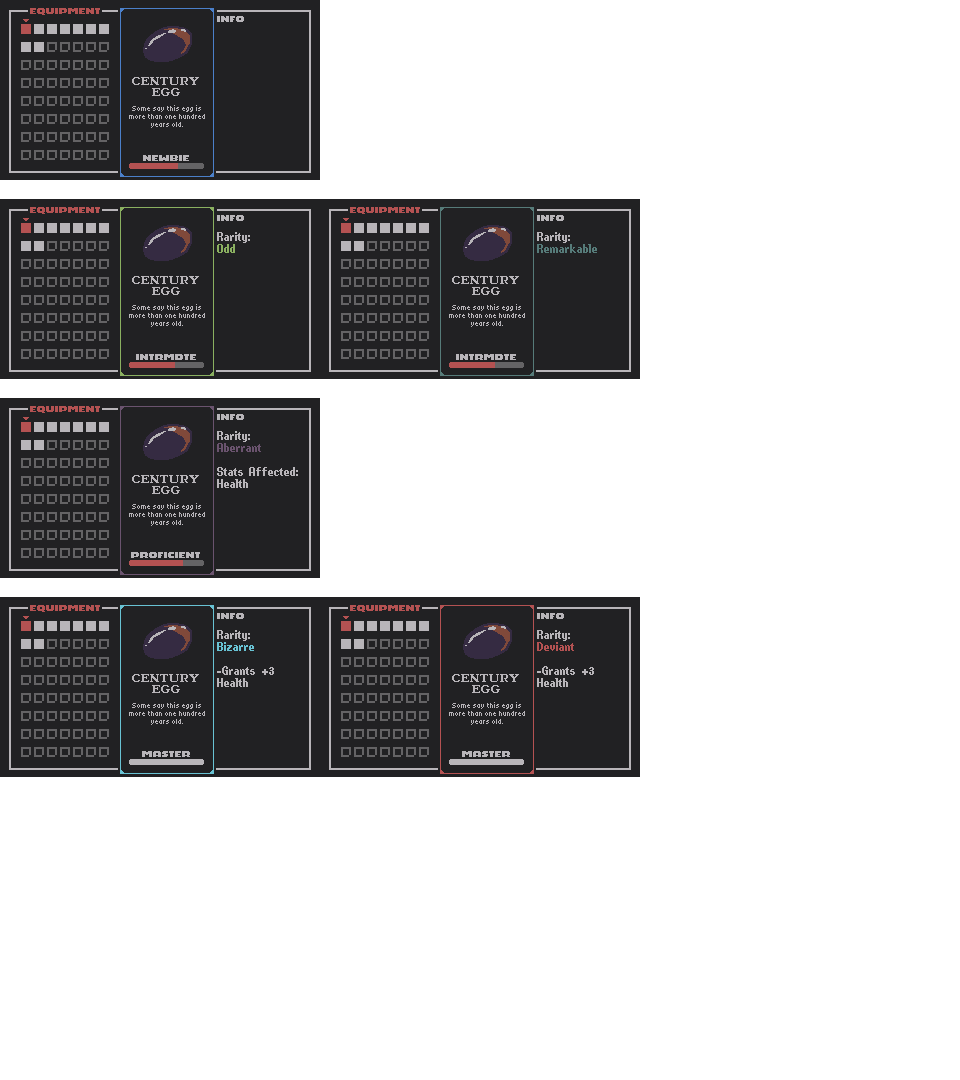
<style>
.page{position:relative;width:960px;height:1080px;background:#ffffff}
.page>*{position:absolute;margin:0}
.t1{font:8px "NotJamChunky8";color:#b45252}
.t2{font:8px "NotJamChunky8";color:#b8b5b9}
.t3{font:11px/11px "NotJamOldStyle11";color:#b8b5b9}
.t4{font:8px/8px "Tiny5-Regular";color:#b8b5b9}
.t5{font:16px/12px "PixelPurl";color:#b8b5b9}
.t6{font:16px/12px "PixelPurl";color:#8ab060}
.t7{font:16px/12px "PixelPurl";color:#567b79}
.t8{font:16px/12px "PixelPurl";color:#6a536e}
.t9{font:16px/12px "PixelPurl";color:#68c2d3}
.t10{font:16px/12px "PixelPurl";color:#b45252}
</style>
<div class="page">
<p class="t1" style="left:30px;top:8px;width:70px;height:7px">EQUIPMENT</p>
<p class="t2" style="left:217px;top:16px;width:27px;height:6px">INFO</p>
<p class="t3" style="left:132px;top:77px;width:67px;height:19px;text-align:center">CENTURY EGG</p>
<p class="t4" style="left:129px;top:105px;width:76px;height:23px;text-align:center">Some say this egg is more than one hundred years old.</p>
<p class="t2" style="left:143px;top:155px;width:46px;height:6px">NEWBIE</p>
<p class="t1" style="left:30px;top:207px;width:70px;height:7px">EQUIPMENT</p>
<p class="t1" style="left:350px;top:207px;width:70px;height:7px">EQUIPMENT</p>
<p class="t2" style="left:217px;top:215px;width:27px;height:6px">INFO</p>
<p class="t2" style="left:537px;top:215px;width:27px;height:6px">INFO</p>
<p class="t5" style="left:217px;top:232px;width:33px;height:21px">Rarity:<br><span class="t6">Odd</span></p>
<p class="t7" style="left:537px;top:232px;width:60px;height:21px"><span class="t5">Rarity:<br></span>Remarkable</p>
<p class="t3" style="left:132px;top:276px;width:67px;height:19px;text-align:center">CENTURY EGG</p>
<p class="t3" style="left:452px;top:276px;width:67px;height:19px;text-align:center">CENTURY EGG</p>
<p class="t4" style="left:129px;top:304px;width:76px;height:23px;text-align:center">Some say this egg is more than one hundred years old.</p>
<p class="t4" style="left:449px;top:304px;width:76px;height:23px;text-align:center">Some say this egg is more than one hundred years old.</p>
<p class="t2" style="left:136px;top:354px;width:60px;height:6px">INTRMDTE</p>
<p class="t2" style="left:456px;top:354px;width:60px;height:6px">INTRMDTE</p>
<p class="t1" style="left:30px;top:406px;width:70px;height:7px">EQUIPMENT</p>
<p class="t2" style="left:217px;top:414px;width:27px;height:6px">INFO</p>
<p class="t5" style="left:217px;top:431px;width:81px;height:57px">Rarity:<br><span class="t8">Aberrant<br></span><br>Stats Affected:<br>Health</p>
<p class="t3" style="left:132px;top:475px;width:67px;height:19px;text-align:center">CENTURY EGG</p>
<p class="t4" style="left:129px;top:503px;width:76px;height:23px;text-align:center">Some say this egg is more than one hundred years old.</p>
<p class="t2" style="left:131px;top:552px;width:69px;height:6px">PROFICIENT</p>
<p class="t1" style="left:30px;top:605px;width:70px;height:7px">EQUIPMENT</p>
<p class="t1" style="left:350px;top:605px;width:70px;height:7px">EQUIPMENT</p>
<p class="t2" style="left:217px;top:613px;width:27px;height:6px">INFO</p>
<p class="t2" style="left:537px;top:613px;width:27px;height:6px">INFO</p>
<p class="t5" style="left:217px;top:630px;width:57px;height:57px">Rarity:<br><span class="t9">Bizarre<br></span><br>-Grants +3 Health</p>
<p class="t5" style="left:537px;top:630px;width:57px;height:57px">Rarity:<br><span class="t10">Deviant<br></span><br>-Grants +3 Health</p>
<p class="t3" style="left:132px;top:674px;width:67px;height:19px;text-align:center">CENTURY EGG</p>
<p class="t3" style="left:452px;top:674px;width:67px;height:19px;text-align:center">CENTURY EGG</p>
<p class="t4" style="left:129px;top:702px;width:76px;height:23px;text-align:center">Some say this egg is more than one hundred years old.</p>
<p class="t4" style="left:449px;top:702px;width:76px;height:23px;text-align:center">Some say this egg is more than one hundred years old.</p>
<p class="t2" style="left:142px;top:751px;width:48px;height:6px">MASTER</p>
<p class="t2" style="left:462px;top:751px;width:48px;height:6px">MASTER</p>
</div>
